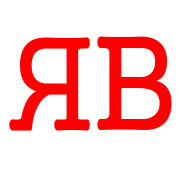
<style>
.page{position:relative;width:180px;height:180px;background:#ffffff}
.page>*{position:absolute;margin:0}
.t1{font:132.2px "Gungsuh";color:#ff0000}
.t2{font:132px "Gungsuh";color:#ff0000}
</style>
<div class="page">
<p class="t1" style="left:9px;top:37px;width:81px;height:94px;rotate:180deg">R</p>
<p class="t2" style="left:97px;top:36px;width:75px;height:95px">B</p>
</div>
